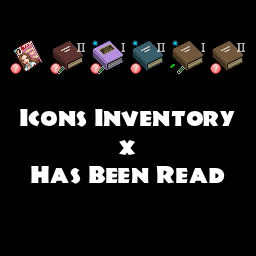
<style>
.page{position:relative;width:256px;height:256px;background:#000000}
.page>*{position:absolute;margin:0}
.t1{font:24px "JungleFever";color:#ffffff}
</style>
<div class="page">
<p class="t1" style="left:20px;top:108px;width:215px;height:76px;text-align:center">Icons Inventory<br>x<br>Has Been Read</p>
</div>
